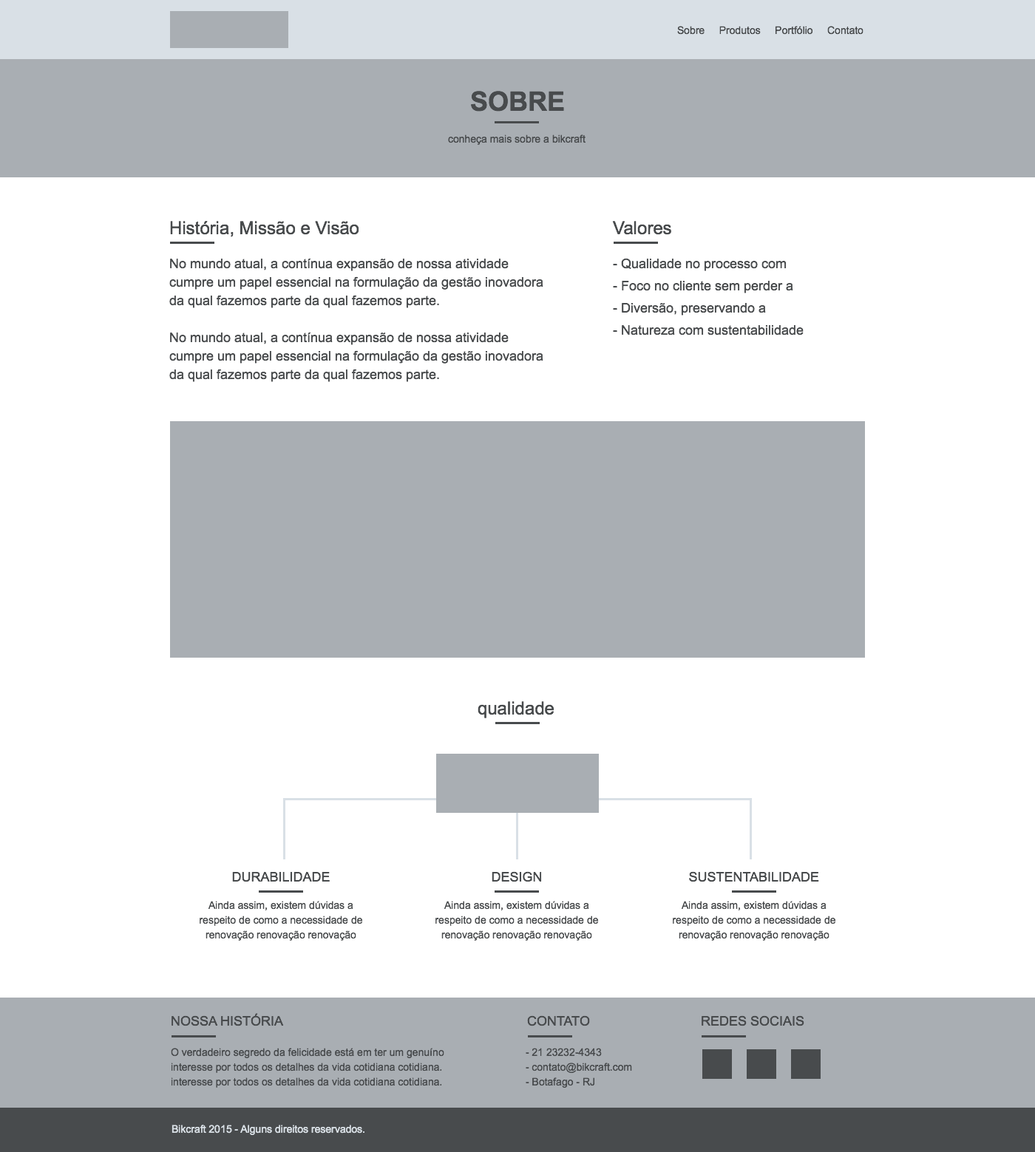
<style>
.page{position:relative;width:1035px;height:1152px;background:#ffffff}
.page>*{position:absolute;margin:0}
.t1{font:10.3px "ArialMT";color:#484b4d}
.t2{font:26.6px "Arial-BoldMT";color:#484b4d;text-transform:uppercase}
.t3{font:17.7px "ArialMT";color:#484b4d}
.t4{font:13.3px/18.5px "ArialMT";color:#484b4d}
.t5{font:13.3px/22.2px "ArialMT";color:#484b4d}
.t6{font:13.3px "ArialMT";color:#484b4d}
.t7{font:10.3px/14.8px "ArialMT";color:#484b4d}
.t8{font:13.3px "ArialMT";color:#484b4d;text-transform:uppercase}
.t9{font:10.3px "ArialMT";color:#d9e0e6}
</style>
<div class="page">
<p class="t1" style="left:677px;top:26px;width:186px;height:9px">Sobre     Produtos     Portfólio     Contato</p>
<p class="t2" style="left:471px;top:91px;width:93px;height:21px">sobre</p>
<p class="t1" style="left:448px;top:135px;width:137px;height:10px">conheça mais sobre a bikcraft</p>
<p class="t3" style="left:170px;top:221px;width:189px;height:16px">História, Missão e Visão</p>
<p class="t3" style="left:612px;top:221px;width:59px;height:14px">Valores</p>
<p class="t4" style="left:169px;top:258px;width:374px;height:124px">No mundo atual, a contínua expansão de nossa atividade cumpre um papel essencial na formulação da gestão inovadora da qual fazemos parte da qual fazemos parte.<br><br>No mundo atual, a contínua expansão de nossa atividade cumpre um papel essencial na formulação da gestão inovadora da qual fazemos parte da qual fazemos parte.</p>
<p class="t5" style="left:613px;top:258px;width:190px;height:78px">- Qualidade no processo com<br>- Foco no cliente sem perder a<br>- Diversão, preservando a<br>- Natureza com sustentabilidade</p>
<p class="t3" style="left:477px;top:701px;width:77px;height:17px">qualidade</p>
<p class="t6" style="left:232px;top:872px;width:98px;height:11px">DURABILIDADE</p>
<p class="t6" style="left:492px;top:871px;width:50px;height:12px">DESIGN</p>
<p class="t6" style="left:689px;top:871px;width:130px;height:12px">SUSTENTABILIDADE</p>
<p class="t7" style="left:200px;top:901px;width:163px;height:40px;text-align:center">Ainda assim, existem dúvidas a respeito de como a necessidade de renovação renovação renovação</p>
<p class="t7" style="left:435px;top:901px;width:164px;height:40px;text-align:center">Ainda assim, existem dúvidas a respeito de como a necessidade de renovação renovação renovação</p>
<p class="t7" style="left:673px;top:901px;width:163px;height:40px;text-align:center">Ainda assim, existem dúvidas a respeito de como a necessidade de renovação renovação renovação</p>
<p class="t8" style="left:171px;top:1013px;width:113px;height:14px">Nossa História</p>
<p class="t8" style="left:527px;top:1016px;width:63px;height:11px">Contato</p>
<p class="t8" style="left:701px;top:1016px;width:103px;height:11px">Redes sociais</p>
<p class="t7" style="left:171px;top:1048px;width:273px;height:40px">O verdadeiro segredo da felicidade está em ter um genuíno interesse por todos os detalhes da vida cotidiana cotidiana.<br>interesse por todos os detalhes da vida cotidiana cotidiana.</p>
<p class="t7" style="left:526px;top:1048px;width:106px;height:40px">- 21 23232-4343<br>- contato@bikcraft.com<br>- Botafago - RJ</p>
<p class="t9" style="left:171px;top:1125px;width:193px;height:10px">Bikcraft 2015 - Alguns direitos reservados.</p>
</div>
